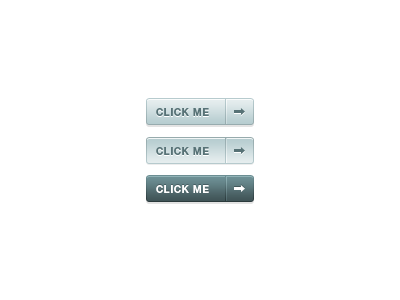
<style>
.page{position:relative;width:400px;height:300px;background:#ffffff}
.page>*{position:absolute;margin:0}
.t1{font:10px "HelveticaNeueLTStd-Bd";letter-spacing:0.05em;color:#577276;text-transform:uppercase}
.t2{font:10px "HelveticaNeueLTStd-Bd";letter-spacing:0.05em;color:#ffffff;text-transform:uppercase}
</style>
<div class="page">
<p class="t1" style="left:156px;top:108px;width:53px;height:8px">click me</p>
<p class="t1" style="left:156px;top:147px;width:53px;height:8px">click me</p>
<p class="t2" style="left:156px;top:185px;width:53px;height:8px">click me</p>
</div>
